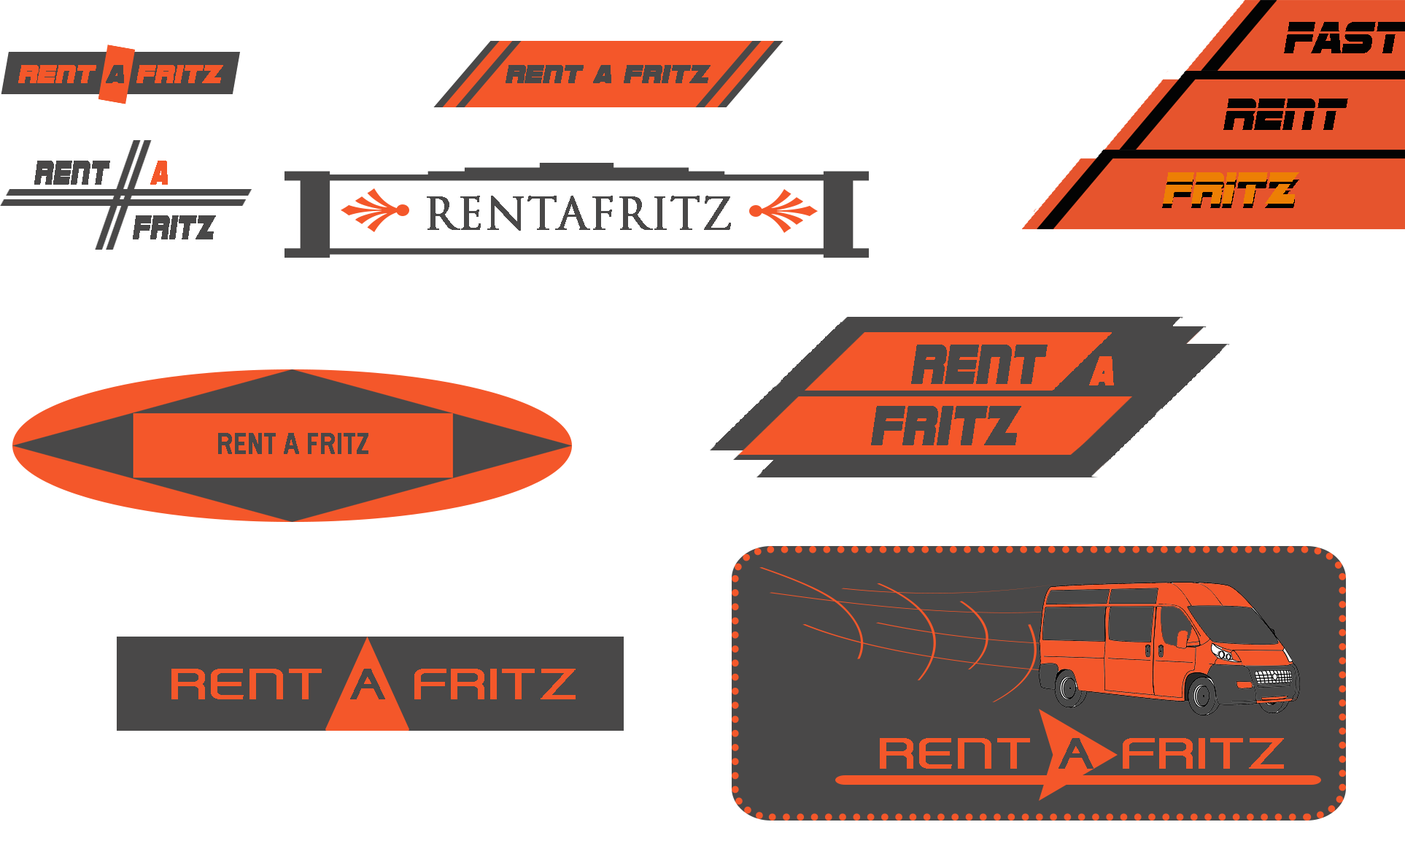
<style>
.page{position:relative;width:1405px;height:849px;background:#ffffff}
.page>*{position:absolute;margin:0}
.t1{font:26.4px "SFSportsNightNS";color:#f4572a;font-weight:bold;scale:1.07 1}
.t2{font:26.4px "SFSportsNightNS";color:#494848;font-weight:bold;scale:1.07 1}
.t3{font:46.5px "SFSportsNight";color:#030303}
.t4{font:35.3px "SFSportsNightNS";color:#494848;font-weight:bold;scale:0.77 1}
.t5{font:35.3px "SFSportsNightNS";color:#f4572a;font-weight:bold;scale:0.77 1}
.t6{font:46.5px "SFSportsNight";color:#ed7f04}
.t7{font:43.3px "SFSportsNight";scale:1.08 1}
.t8{font:43.8px "TrajanPro-Regular";color:#494848;font-weight:bold}
.t9{font:58px "SFSportsNightNS";color:#494848;font-weight:bold;scale:0.85 1}
.t10{font:42.8px "SFSportsNightNS";color:#f4572a;font-weight:bold;scale:0.85 1}
.t11{font:30px "FranklinGothic-Medium";color:#494848;font-weight:bold;scale:0.83 1}
.t12{font:44.3px "HallFeticaWide";color:#f4572a;font-weight:bold;scale:0.9 1}
.t13{font:44.3px "HallFeticaWide";color:#494848;font-weight:bold;scale:0.9 1}
</style>
<div class="page">
<p class="t1" style="left:18px;top:65px;width:205px;height:18px">RENt <span class="t2">a </span>FRitz</p>
<p class="t2" style="left:506px;top:65px;width:205px;height:18px">RENt a FRitz</p>
<p class="t3" style="left:1224px;top:98px;width:124px;height:32px">RENT</p>
<p class="t4" style="left:34px;top:161px;width:76px;height:24px">RENT</p>
<p class="t5" style="left:150px;top:161px;width:18px;height:24px">A</p>
<p class="t6" style="left:1163px;top:172px;width:136px;height:32px">FRITZ</p>
<p class="t7" style="left:1162px;top:179px;width:137px;height:29px">FRITZ</p>
<p class="t8" style="left:427px;top:196px;width:304px;height:35px">RENTAFRITZ</p>
<p class="t4" style="left:133px;top:215px;width:83px;height:24px">FRITZ</p>
<p class="t9" style="left:911px;top:344px;width:137px;height:40px">RENT</p>
<p class="t10" style="left:1089px;top:356px;width:25px;height:29px">A</p>
<p class="t9" style="left:871px;top:406px;width:150px;height:39px">Fritz</p>
<p class="t11" style="left:218px;top:433px;width:150px;height:21px">RENT A FRITZ</p>
<p class="t12" style="left:171px;top:668px;width:405px;height:31px">RENT <span class="t13">A </span>FRITZ</p>
<p class="t12" style="left:880px;top:738px;width:404px;height:30px">RENT <span class="t13">A </span>FRITZ</p>
</div>
